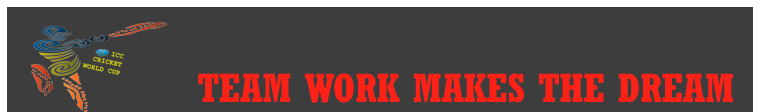
<style>
.page{position:relative;width:760px;height:112px;background:#3d3d3d}
.page>*{position:absolute;margin:0}
.t1{font:40px "Rockwell-CondensedBold";color:#fc2217}
</style>
<div class="page">
<p class="t1" style="left:198px;top:73px;width:535px;height:30px">TEAM WORK MAKES THE DREAM WORK</p>
</div>
